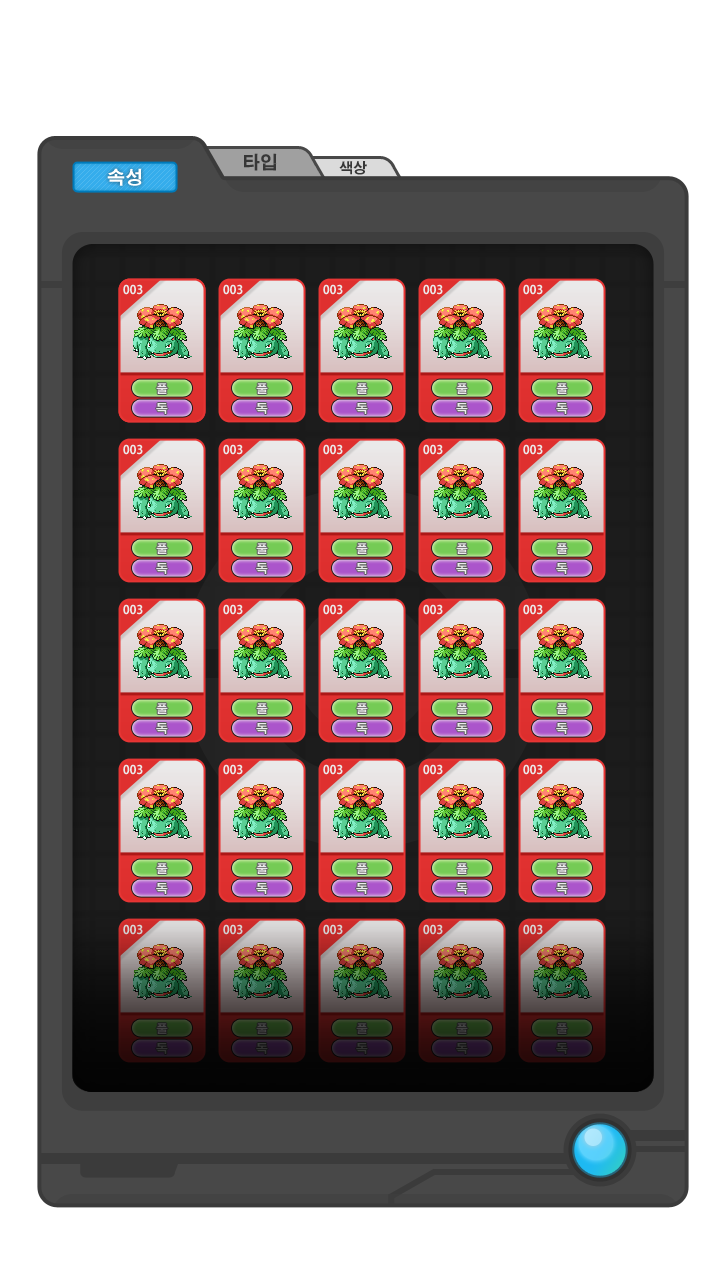
<style>
.page{position:relative;width:720px;height:1280px;background:#ffffff}
.page>*{position:absolute;margin:0}
.t1{font:18px "AdobeGothicStd-Bold";color:#373737}
.t2{font:14px "AdobeGothicStd-Bold";color:#373737}
.t3{font:18px "AdobeGothicStd-Bold";color:#ffffff}
.t4{font:12px "AdobeGothicStd-Bold";color:#ebebeb}
</style>
<div class="page">
<p class="t1" style="left:244px;top:153px;width:33px;height:18px">타입</p>
<p class="t2" style="left:339px;top:161px;width:28px;height:14px">색상</p>
<p class="t3" style="left:107px;top:168px;width:35px;height:18px">속성</p>
<p class="t4" style="left:123px;top:284px;width:20px;height:11px">003</p>
<p class="t4" style="left:156px;top:383px;width:12px;height:11px">풀</p>
</div>
